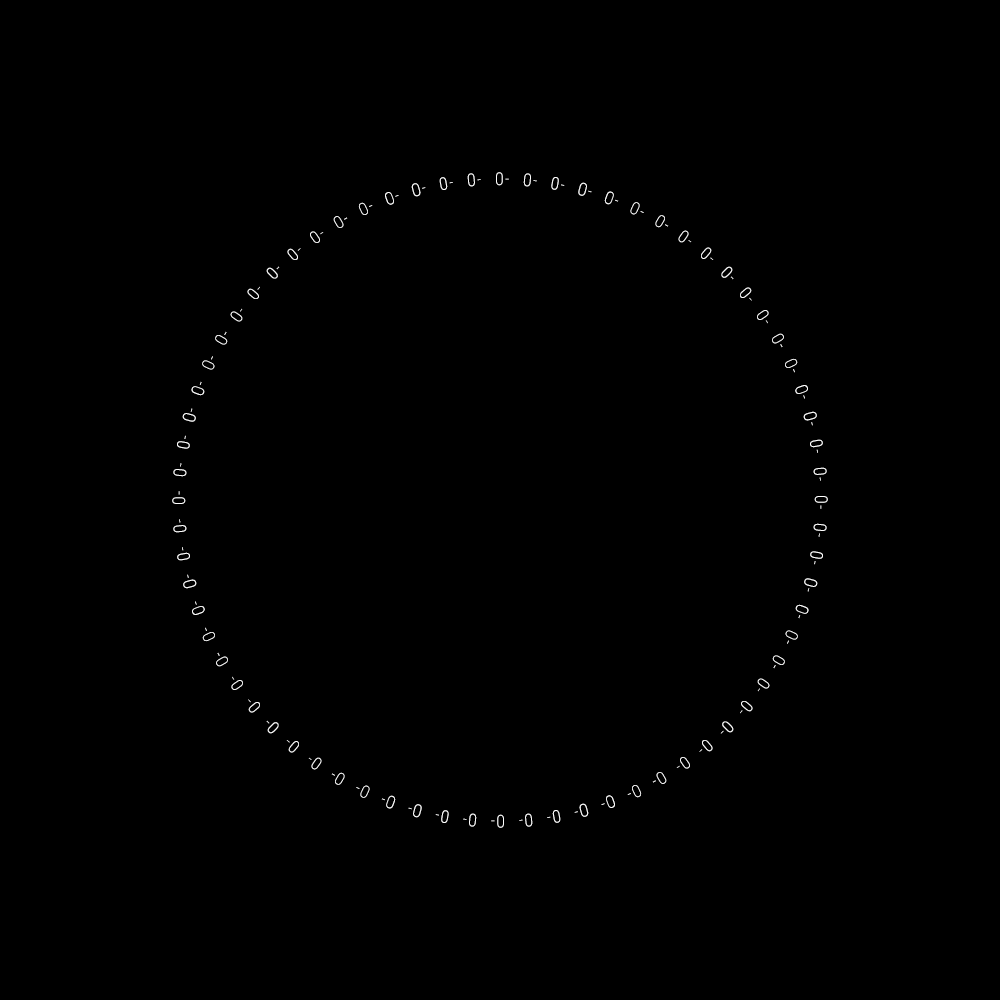
<style>
.page{position:relative;width:1000px;height:1000px;background:#000000}
.page>*{position:absolute;margin:0}
.t1{font:19.1px "ARBONNIE";letter-spacing:0.1em;color:#ffffff}
.t2{font:19.1px "ARBONNIE";letter-spacing:0.1em}
</style>
<div class="page">
<p class="t1" style="left:467px;top:173px;width:14px;height:14px;rotate:-5deg">0-</p>
<p class="t1" style="left:496px;top:172px;width:13px;height:14px">0-</p>
<p class="t1" style="left:523px;top:173px;width:14px;height:14px;rotate:5deg">0-</p>
<p class="t1" style="left:411px;top:183px;width:15px;height:14px;rotate:-15deg">0-</p>
<p class="t1" style="left:439px;top:177px;width:14px;height:13px;rotate:-10deg">0-</p>
<p class="t1" style="left:551px;top:177px;width:14px;height:13px;rotate:10deg">0-</p>
<p class="t1" style="left:578px;top:182px;width:14px;height:14px;rotate:15deg">0-</p>
<p class="t1" style="left:385px;top:192px;width:14px;height:13px;rotate:-20deg">0-</p>
<p class="t1" style="left:604px;top:191px;width:15px;height:14px;rotate:20deg">0-</p>
<p class="t2" style="left:358px;top:202px;width:15px;height:13px;rotate:-25deg">0-</p>
<p class="t1" style="left:630px;top:202px;width:14px;height:13px;rotate:25deg">0-</p>
<p class="t2" style="left:333px;top:216px;width:15px;height:12px;rotate:-30deg">0-</p>
<p class="t1" style="left:655px;top:215px;width:14px;height:13px;rotate:30deg">0-</p>
<p class="t1" style="left:310px;top:231px;width:14px;height:12px;rotate:-35deg">0-</p>
<p class="t1" style="left:678px;top:230px;width:14px;height:13px;rotate:35deg">0-</p>
<p class="t1" style="left:287px;top:248px;width:14px;height:12px;rotate:-40deg">0-</p>
<p class="t1" style="left:701px;top:247px;width:13px;height:13px;rotate:40deg">0-</p>
<p class="t1" style="left:266px;top:266px;width:14px;height:13px;rotate:-45deg">0-</p>
<p class="t1" style="left:721px;top:266px;width:13px;height:14px;rotate:45deg">0-</p>
<p class="t1" style="left:247px;top:286px;width:13px;height:13px;rotate:-50deg">0-</p>
<p class="t1" style="left:740px;top:287px;width:12px;height:14px;rotate:50deg">0-</p>
<p class="t1" style="left:230px;top:308px;width:13px;height:14px;rotate:-55deg">0-</p>
<p class="t1" style="left:757px;top:310px;width:12px;height:14px;rotate:55deg">0-</p>
<p class="t1" style="left:215px;top:331px;width:13px;height:14px;rotate:-60deg">0-</p>
<p class="t2" style="left:772px;top:333px;width:12px;height:15px;rotate:60deg">0-</p>
<p class="t1" style="left:202px;top:356px;width:13px;height:14px;rotate:-65deg">0-</p>
<p class="t2" style="left:785px;top:358px;width:13px;height:15px;rotate:65deg">0-</p>
<p class="t1" style="left:191px;top:381px;width:14px;height:15px;rotate:-70deg">0-</p>
<p class="t1" style="left:795px;top:385px;width:13px;height:14px;rotate:70deg">0-</p>
<p class="t1" style="left:182px;top:408px;width:14px;height:14px;rotate:-75deg">0-</p>
<p class="t1" style="left:803px;top:411px;width:14px;height:15px;rotate:75deg">0-</p>
<p class="t1" style="left:177px;top:435px;width:13px;height:14px;rotate:-80deg">0-</p>
<p class="t1" style="left:810px;top:439px;width:13px;height:14px;rotate:80deg">0-</p>
<p class="t1" style="left:173px;top:463px;width:14px;height:14px;rotate:-85deg">0-</p>
<p class="t1" style="left:813px;top:467px;width:14px;height:14px;rotate:85deg">0-</p>
<p class="t1" style="left:172px;top:491px;width:14px;height:13px;rotate:-90deg">0-</p>
<p class="t1" style="left:814px;top:496px;width:14px;height:13px;rotate:90deg">0-</p>
<p class="t1" style="left:173px;top:519px;width:14px;height:14px;rotate:-95deg">0-</p>
<p class="t1" style="left:813px;top:523px;width:14px;height:14px;rotate:95deg">0-</p>
<p class="t1" style="left:177px;top:547px;width:13px;height:14px;rotate:-100deg">0-</p>
<p class="t1" style="left:810px;top:551px;width:13px;height:14px;rotate:100deg">0-</p>
<p class="t1" style="left:183px;top:574px;width:14px;height:15px;rotate:-105deg">0-</p>
<p class="t1" style="left:804px;top:578px;width:14px;height:14px;rotate:105deg">0-</p>
<p class="t1" style="left:192px;top:601px;width:13px;height:14px;rotate:-110deg">0-</p>
<p class="t1" style="left:795px;top:604px;width:14px;height:15px;rotate:110deg">0-</p>
<p class="t2" style="left:202px;top:627px;width:13px;height:15px;rotate:-115deg">0-</p>
<p class="t1" style="left:785px;top:630px;width:13px;height:14px;rotate:115deg">0-</p>
<p class="t2" style="left:216px;top:652px;width:12px;height:15px;rotate:-120deg">0-</p>
<p class="t1" style="left:772px;top:655px;width:13px;height:14px;rotate:120deg">0-</p>
<p class="t1" style="left:231px;top:676px;width:12px;height:14px;rotate:-125deg">0-</p>
<p class="t1" style="left:757px;top:678px;width:13px;height:14px;rotate:125deg">0-</p>
<p class="t1" style="left:248px;top:699px;width:12px;height:14px;rotate:-130deg">0-</p>
<p class="t1" style="left:740px;top:701px;width:13px;height:13px;rotate:130deg">0-</p>
<p class="t1" style="left:266px;top:720px;width:13px;height:14px;rotate:-135deg">0-</p>
<p class="t1" style="left:720px;top:721px;width:14px;height:13px;rotate:135deg">0-</p>
<p class="t1" style="left:286px;top:740px;width:13px;height:13px;rotate:-140deg">0-</p>
<p class="t1" style="left:699px;top:740px;width:14px;height:12px;rotate:140deg">0-</p>
<p class="t1" style="left:308px;top:757px;width:14px;height:13px;rotate:-145deg">0-</p>
<p class="t1" style="left:676px;top:757px;width:14px;height:12px;rotate:145deg">0-</p>
<p class="t1" style="left:331px;top:772px;width:14px;height:13px;rotate:-150deg">0-</p>
<p class="t2" style="left:652px;top:772px;width:15px;height:12px;rotate:150deg">0-</p>
<p class="t1" style="left:356px;top:785px;width:14px;height:13px;rotate:-155deg">0-</p>
<p class="t2" style="left:627px;top:785px;width:15px;height:13px;rotate:155deg">0-</p>
<p class="t1" style="left:381px;top:795px;width:15px;height:14px;rotate:-160deg">0-</p>
<p class="t1" style="left:601px;top:795px;width:14px;height:13px;rotate:160deg">0-</p>
<p class="t1" style="left:408px;top:804px;width:14px;height:14px;rotate:-165deg">0-</p>
<p class="t1" style="left:574px;top:803px;width:15px;height:14px;rotate:165deg">0-</p>
<p class="t1" style="left:435px;top:810px;width:14px;height:13px;rotate:-170deg">0-</p>
<p class="t1" style="left:463px;top:813px;width:14px;height:14px;rotate:-175deg">0-</p>
<p class="t1" style="left:491px;top:814px;width:13px;height:14px;rotate:-180deg">0-</p>
<p class="t1" style="left:519px;top:813px;width:14px;height:14px;rotate:175deg">0-</p>
<p class="t1" style="left:547px;top:810px;width:14px;height:13px;rotate:170deg">0-</p>
</div>
